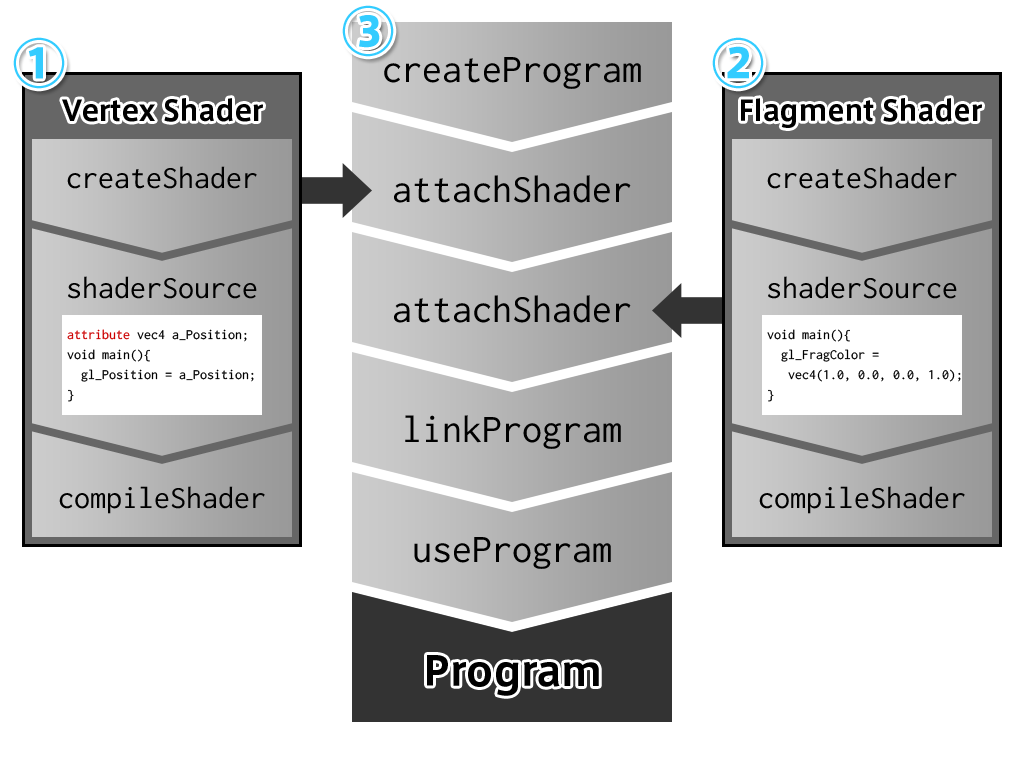
<style>
.page{position:relative;width:1024px;height:768px;background:#ffffff}
.page>*{position:absolute;margin:0}
.t1{font:60px "AxisStd-Bold";color:#33ccff}
.t2{font:40px/20px "Ricty-Regular";color:#000000}
.t3{font:28px "AxisStd-Bold";color:#000000}
.t4{font:32px/10px "Ricty-Regular";color:#000000}
.t5{font:14px/20px "Ricty-Regular";color:#000000}
.t6{font:14px/20px "Ricty-Regular";color:#cc0000}
.t7{font:40px "AxisStd-Bold";color:#000000}
</style>
<div class="page">
<p class="t1" style="left:342px;top:5px;width:52px;height:52px">③</p>
<p class="t1" style="left:13px;top:37px;width:52px;height:52px">①</p>
<p class="t1" style="left:712px;top:37px;width:52px;height:52px">②</p>
<p class="t2" style="left:384px;top:57px;width:257px;height:512px;text-align:center">createProgram<br><br><br><br><br><br>attachShader<br><br><br><br><br><br>attachShader<br><br><br><br><br><br>linkProgram<br><br><br><br><br><br>useProgram</p>
<p class="t3" style="left:62px;top:98px;width:201px;height:24px">Vertex Shader</p>
<p class="t3" style="left:741px;top:98px;width:241px;height:30px">Flagment Shader</p>
<p class="t4" style="left:59px;top:166px;width:206px;height:348px;text-align:center">createShader<br><br><br><br><br><br><br><br><br><br><br>shaderSource<br><br><br><br><br><br><br><br><br><br><br><br><br><br><br><br><br><br><br><br><br>compileShader</p>
<p class="t4" style="left:759px;top:166px;width:206px;height:348px;text-align:center">createShader<br><br><br><br><br><br><br><br><br><br><br>shaderSource<br><br><br><br><br><br><br><br><br><br><br><br><br><br><br><br><br><br><br><br><br>compileShader</p>
<p class="t5" style="left:67px;top:329px;width:187px;height:73px"><span class="t6">attribute</span> vec4 a_Position;<br>void main(){<br>  gl_Position = a_Position;<br>}</p>
<p class="t5" style="left:767px;top:329px;width:194px;height:73px">void main(){<br>  gl_FragColor = <br>   vec4(1.0, 0.0, 0.0, 1.0);<br>}</p>
<p class="t7" style="left:427px;top:655px;width:172px;height:41px">Program</p>
</div>
